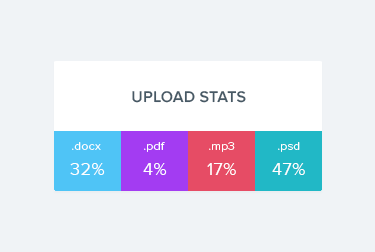
<style>
.page{position:relative;width:375px;height:252px;background:#f0f3f6}
.page>*{position:absolute;margin:0}
.t1{font:16px "ProximaNova-Semibold";letter-spacing:0.01em;color:#475965}
.t2{font:12px "ProximaNova-Light";letter-spacing:0.025em;color:#ffffff}
.t3{font:18px "ProximaNova-Regular";letter-spacing:0.025em;color:#ffffff}
</style>
<div class="page">
<p class="t1" style="left:132px;top:91px;width:114px;height:12px">UPLOAD STATS</p>
<p class="t2" style="left:72px;top:142px;width:29px;height:8px">.docx</p>
<p class="t2" style="left:144px;top:142px;width:21px;height:10px">.pdf</p>
<p class="t2" style="left:209px;top:142px;width:26px;height:10px">.mp3</p>
<p class="t2" style="left:278px;top:142px;width:22px;height:10px">.psd</p>
<p class="t3" style="left:70px;top:163px;width:35px;height:12px">32%</p>
<p class="t3" style="left:143px;top:163px;width:24px;height:12px">4%</p>
<p class="t3" style="left:207px;top:163px;width:29px;height:12px">17%</p>
<p class="t3" style="left:272px;top:163px;width:33px;height:12px">47%</p>
</div>
